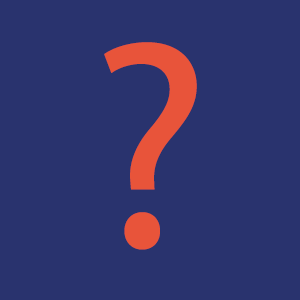
<style>
.page{position:relative;width:300px;height:300px;background:#29336e}
.page>*{position:absolute;margin:0}
.t1{font:297.8px "MyriadPro-Regular";color:#e8543a}
</style>
<div class="page">
<p class="t1" style="left:104px;top:42px;width:93px;height:208px">?</p>
</div>
